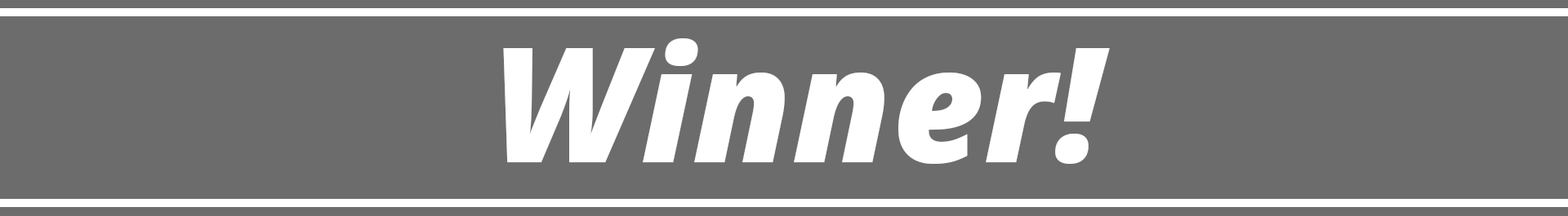
<style>
.page{position:relative;width:1568px;height:216px;background:#6c6c6c}
.page>*{position:absolute;margin:0}
.t1{font:159.9px "OpenSans-ExtraboldItalic";color:#ffffff}
</style>
<div class="page">
<p class="t1" style="left:503px;top:38px;width:607px;height:126px">Winner!</p>
</div>
